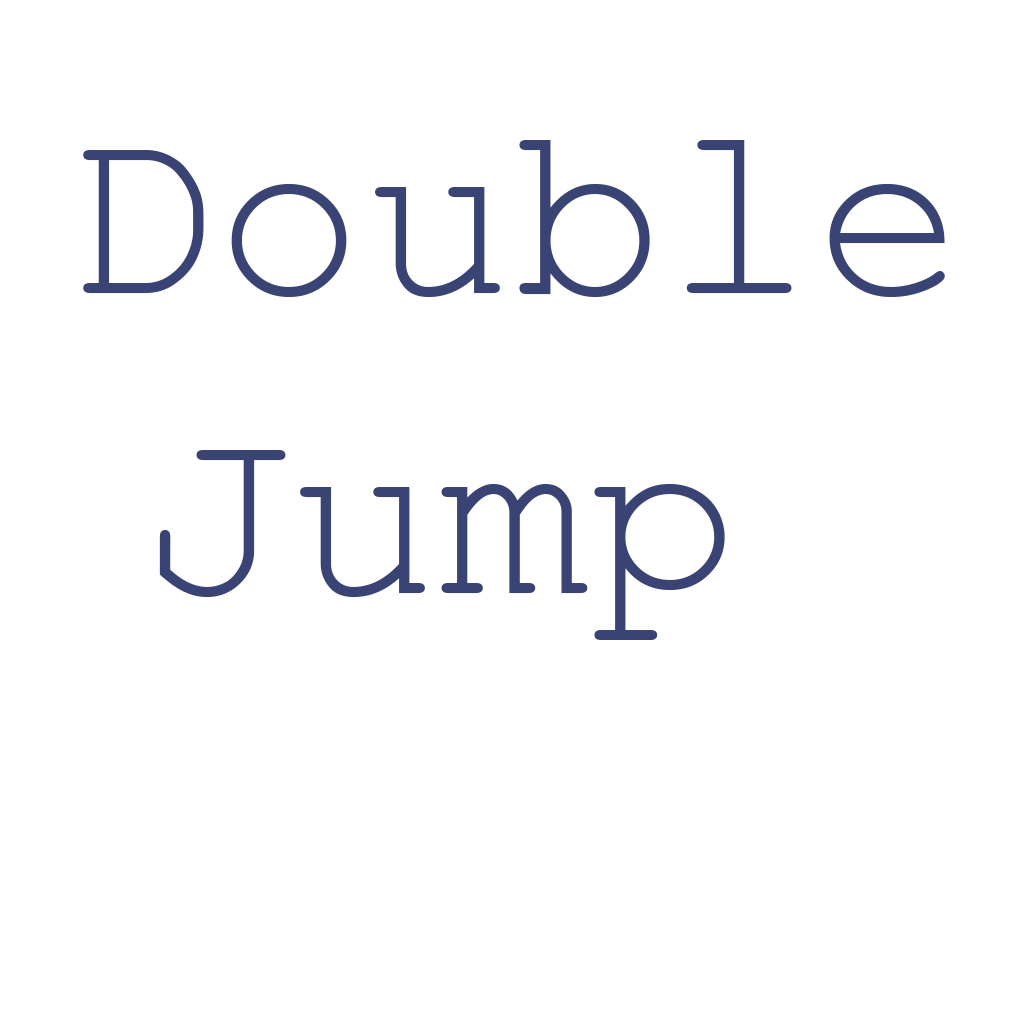
<style>
.page{position:relative;width:1024px;height:1024px;background:#ffffff}
.page>*{position:absolute;margin:0}
.t1{font:250px "CourierNewPSMT";color:#394374}
</style>
<div class="page">
<p class="t1" style="left:83px;top:140px;width:862px;height:500px;text-align:center">Double<br>Jump</p>
</div>
